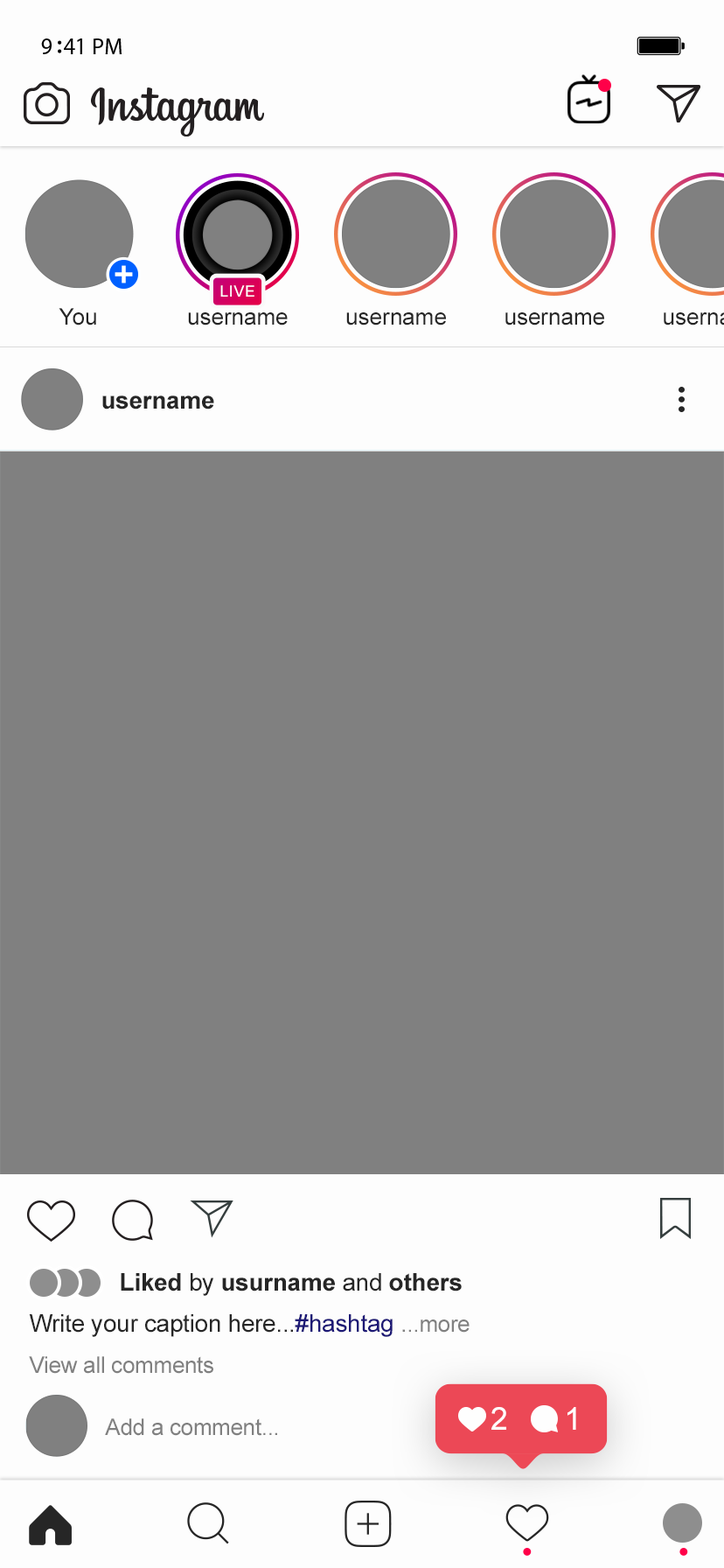
<style>
.page{position:relative;width:724px;height:1568px;background:#808080}
.page>*{position:absolute;margin:0}
.t1{font:15.5px "ArialMT";letter-spacing:0.042em;color:#ffffff}
.t2{font:22.7px "ArialMT";color:#262626}
.t3{font:24.5px "Arial-BoldMT";letter-spacing:-0.01em;color:#262626}
.t4{font:24.5px "ArialMT";letter-spacing:-0.01em;color:#262626}
.t5{font:24.5px "ArialMT";letter-spacing:-0.011em;color:#262626}
.t6{font:24.5px "ArialMT";letter-spacing:-0.011em;color:#1d1976}
.t7{font:24.5px "ArialMT";letter-spacing:-0.011em;color:#808080}
.t8{font:22.8px "ArialMT";letter-spacing:-0.011em;color:#808080}
.t9{font:31.5px "ArialMT";letter-spacing:-0.01em;color:#ffffff}
</style>
<div class="page">
<p class="t1" style="left:220px;top:285px;width:35px;height:12px">LIVE</p>
<p class="t2" style="left:59px;top:308px;width:37px;height:18px">You</p>
<p class="t2" style="left:188px;top:312px;width:100px;height:14px">username</p>
<p class="t2" style="left:346px;top:312px;width:100px;height:14px">username</p>
<p class="t2" style="left:506px;top:312px;width:99px;height:14px">username</p>
<p class="t3" style="left:102px;top:396px;width:112px;height:14px">username</p>
<p class="t3" style="left:121px;top:1273px;width:341px;height:23px">Liked <span class="t4">by </span>usurname <span class="t4">and</span> others</p>
<p class="t5" style="left:29px;top:1314px;width:441px;height:23px">Write your caption here...<span class="t6">#hashtag </span><span class="t7">.</span><span class="t8">..more</span></p>
<p class="t8" style="left:29px;top:1356px;width:185px;height:18px">View all comments</p>
<p class="t9" style="left:492px;top:1407px;width:15px;height:23px">2</p>
<p class="t9" style="left:568px;top:1407px;width:9px;height:23px">1</p>
<p class="t8" style="left:105px;top:1418px;width:172px;height:18px">Add a comment...</p>
</div>
